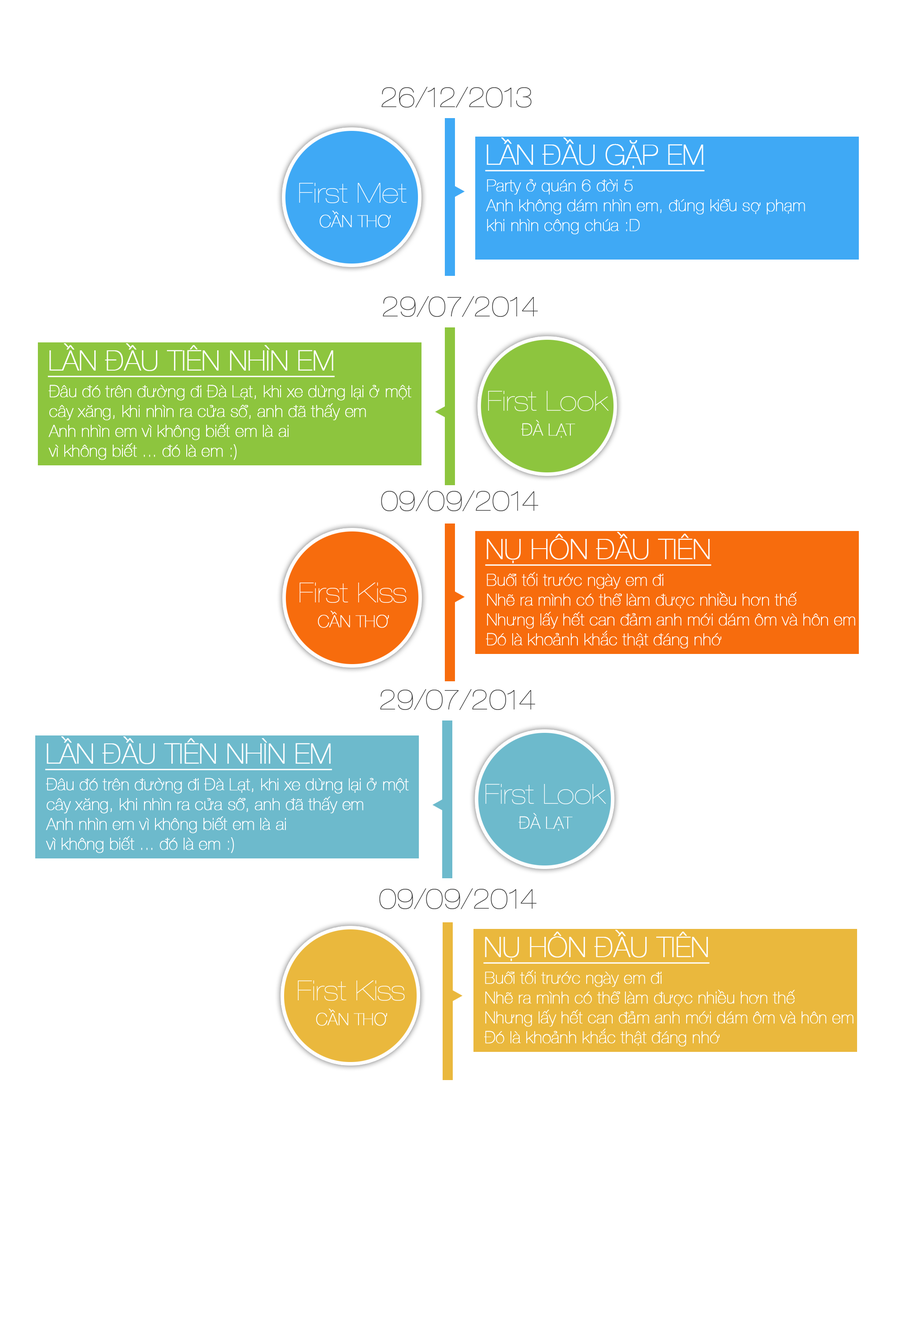
<style>
.page{position:relative;width:902px;height:1322px;background:#ffffff}
.page>*{position:absolute;margin:0}
.t1{font:27.5px "HelveticaNeue-UltraLigCond";color:#3c3c3c}
.t2{font:27.5px "HelveticaNeue-UltraLight";color:#ffffff;font-weight:bold;text-decoration:underline}
.t3{font:27.5px "HelveticaNeue-UltraLigCond";color:#ffffff;font-weight:bold}
.t4{font:16.5px "HelveticaNeue-UltraLight";color:#ffffff;font-weight:bold}
</style>
<div class="page">
<p class="t1" style="left:382px;top:87px;width:150px;height:20px">26/12/2013</p>
<p class="t2" style="left:485px;top:137px;width:220px;height:34px">LẦN ĐẦU GẶP EM</p>
<p class="t3" style="left:299px;top:182px;width:108px;height:21px">First Met</p>
<p class="t4" style="left:486px;top:179px;width:319px;height:55px">Party ở quán 6 đời 5<br>Anh không dám nhìn em, đúng kiểu sợ phạm<br>khi nhìn công chúa :D</p>
<p class="t4" style="left:319px;top:211px;width:72px;height:17px">CẦN THƠ</p>
<p class="t1" style="left:383px;top:296px;width:155px;height:21px">29/07/2014</p>
<p class="t2" style="left:48px;top:343px;width:287px;height:34px">LẦN ĐẦU TIÊN NHÌN EM</p>
<p class="t4" style="left:48px;top:385px;width:363px;height:75px">Đâu đó trên đường đi Đà Lạt, khi xe dừng lại ở một<br>cây xăng, khi nhìn ra cửa sổ, anh đã thấy em<br>Anh nhìn em vì không biết em là ai<br>vì không biết ... đó là em :)</p>
<p class="t3" style="left:488px;top:390px;width:121px;height:21px">First Look</p>
<p class="t4" style="left:521px;top:420px;width:54px;height:18px">ĐÀ LẠT</p>
<p class="t1" style="left:381px;top:490px;width:157px;height:21px">09/09/2014</p>
<p class="t2" style="left:485px;top:532px;width:226px;height:34px">NỤ HÔN ĐẦU TIÊN</p>
<p class="t3" style="left:300px;top:582px;width:107px;height:21px">First Kiss</p>
<p class="t4" style="left:486px;top:572px;width:370px;height:76px">Buổi tối trước ngày em đi<br>Nhẽ ra mình có thể làm được nhiều hơn thế<br>Nhưng lấy hết can đảm anh mới dám ôm và hôn em<br>Đó là khoảnh khắc thật đáng nhớ</p>
<p class="t4" style="left:318px;top:611px;width:71px;height:17px">CẦN THƠ</p>
<p class="t1" style="left:380px;top:689px;width:155px;height:21px">29/07/2014</p>
<p class="t2" style="left:45px;top:736px;width:287px;height:34px">LẦN ĐẦU TIÊN NHÌN EM</p>
<p class="t4" style="left:46px;top:778px;width:363px;height:75px">Đâu đó trên đường đi Đà Lạt, khi xe dừng lại ở một<br>cây xăng, khi nhìn ra cửa sổ, anh đã thấy em<br>Anh nhìn em vì không biết em là ai<br>vì không biết ... đó là em :)</p>
<p class="t3" style="left:485px;top:783px;width:121px;height:21px">First Look</p>
<p class="t4" style="left:519px;top:813px;width:54px;height:18px">ĐÀ LẠT</p>
<p class="t1" style="left:379px;top:888px;width:158px;height:21px">09/09/2014</p>
<p class="t2" style="left:483px;top:930px;width:227px;height:33px">NỤ HÔN ĐẦU TIÊN</p>
<p class="t4" style="left:484px;top:970px;width:370px;height:76px">Buổi tối trước ngày em đi<br>Nhẽ ra mình có thể làm được nhiều hơn thế<br>Nhưng lấy hết can đảm anh mới dám ôm và hôn em<br>Đó là khoảnh khắc thật đáng nhớ</p>
<p class="t3" style="left:298px;top:980px;width:107px;height:20px">First Kiss</p>
<p class="t4" style="left:316px;top:1008px;width:71px;height:18px">CẦN THƠ</p>
</div>
